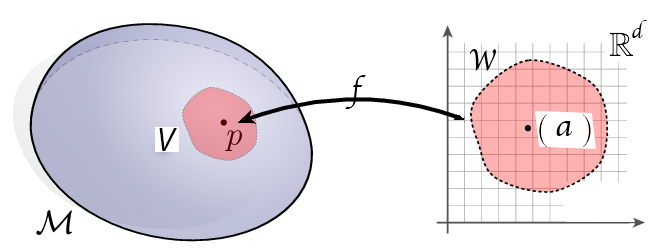
<style>
.page{position:relative;width:650px;height:250px;background:#ffffff}
.page>*{position:absolute;margin:0}
.t1{font:21px "Apple-Chancery";color:#000000}
.t2{font:30px "Apple-Chancery";color:#000000}
.t3{font:27px "Apple-Chancery";color:#000000}
.t4{font:33px "Apple-Chancery";color:#000000}
.t5{font:33px "MyriadPro-It";color:#000000}
</style>
<div class="page">
<p class="t1" style="left:632px;top:20px;width:15px;height:18px">d</p>
<p class="t2" style="left:470px;top:49px;width:27px;height:22px">W</p>
<p class="t3" style="left:345px;top:75px;width:21px;height:34px">f</p>
<p class="t4" style="left:556px;top:121px;width:17px;height:15px">a</p>
<p class="t5" style="left:159px;top:128px;width:18px;height:23px">V</p>
</div>
